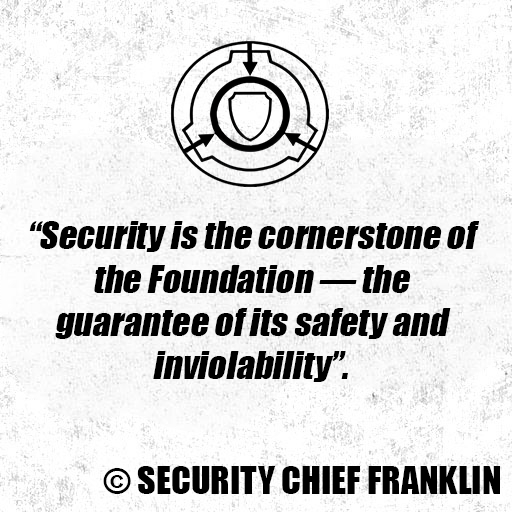
<style>
.page{position:relative;width:512px;height:512px}
.page>*{position:absolute;margin:0}
.t1{font:36px "Impact";color:#000000;font-style:italic}
.t2{font:36px "Impact";color:#000000}
</style>
<div class="page">
<p class="t1" style="left:29px;top:221px;width:451px;height:161px;text-align:center">“Security is the cornerstone of the Foundation — the guarantee of its safety and inviolability”.</p>
<p class="t2" style="left:103px;top:466px;width:397px;height:28px">© SECURITY CHIEF FRANKLIN</p>
</div>
